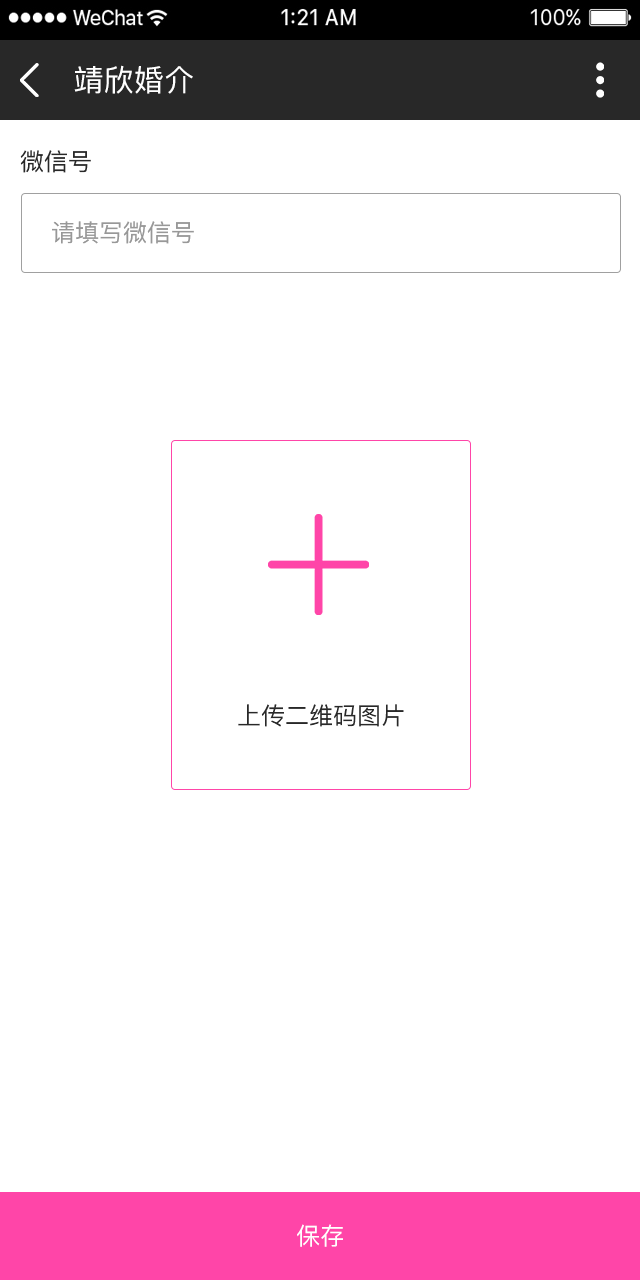
<style>
.page{position:relative;width:640px;height:1280px;background:#ffffff}
.page>*{position:absolute;margin:0}
.t1{font:30px "PingFang-SC-Medium";letter-spacing:0.01em;color:#ffffff;text-transform:uppercase}
.t2{font:24px "PingFang-SC-Medium";color:#282828;text-transform:uppercase}
.t3{font:24px "PingFang-SC-Medium";color:#989898;text-transform:uppercase}
.t4{font:24px "PingFang-SC-Medium";color:#ffffff;text-transform:uppercase}
</style>
<div class="page">
<p class="t1" style="left:74px;top:65px;width:119px;height:29px">靖欣婚介</p>
<p class="t2" style="left:20px;top:150px;width:71px;height:23px">微信号</p>
<p class="t3" style="left:52px;top:221px;width:142px;height:23px">请填写微信号</p>
<p class="t2" style="left:238px;top:704px;width:166px;height:23px">上传二维码图片</p>
<p class="t4" style="left:297px;top:1224px;width:46px;height:23px">保存</p>
</div>
